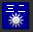
<style>
.page{position:relative;width:33px;height:32px;background:#000090}
.page>*{position:absolute;margin:0}
.t1{font:10.4px "SimSun";color:#ffffff}
</style>
<div class="page">
<p class="t1" style="left:6px;top:5px;width:19px;height:7px">三二</p>
</div>
